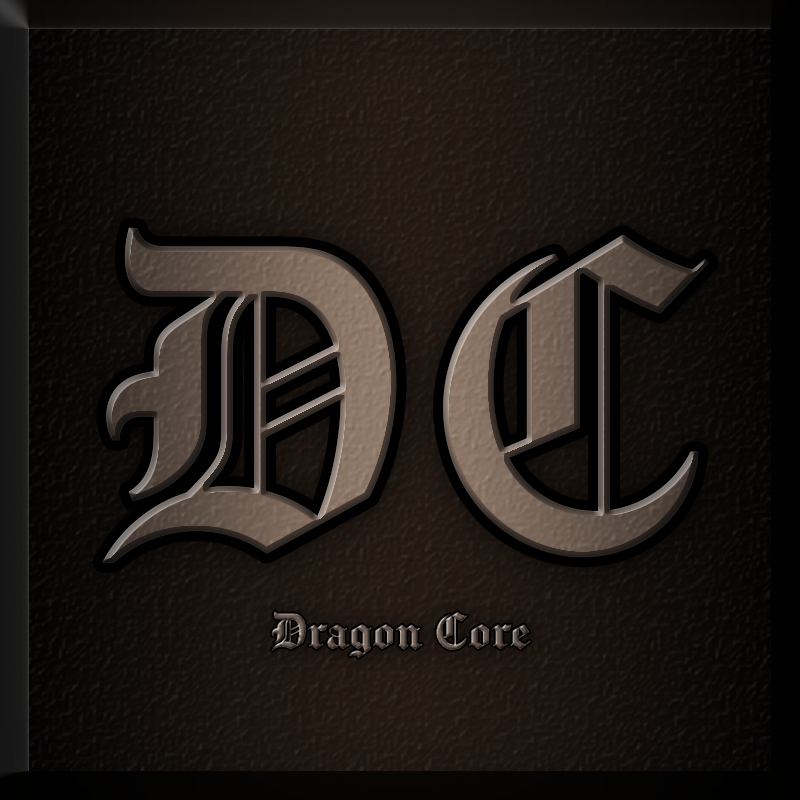
<style>
.page{position:relative;width:800px;height:800px}
.page>*{position:absolute;margin:0}
.t1{font:410.2px "Chomsky"}
.t2{font:48px "Chomsky"}
</style>
<div class="page">
<p class="t1" style="left:102px;top:227px;width:607px;height:336px">DC</p>
<p class="t2" style="left:271px;top:611px;width:260px;height:47px">Dragon Core</p>
</div>
